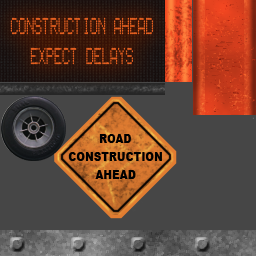
<style>
.page{position:relative;width:256px;height:256px;background:#464646}
.page>*{position:absolute;margin:0}
.t1{font:16.7px/30.1px "Gas-Plasma-PG";color:#f26521;scale:0.48 1}
.t2{font:12px/18px "Arial-Black";color:#000000;scale:0.87 1}
</style>
<div class="page">
<p class="t1" style="left:10px;top:17px;width:143px;height:48px;text-align:center">CONSTRUCTION AHEAD<br>EXPECT DELAYS</p>
<p class="t2" style="left:68px;top:134px;width:94px;height:45px;text-align:center">ROAD<br>CONSTRUCTION<br>AHEAD</p>
</div>
